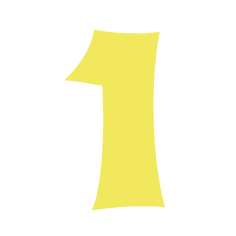
<style>
.page{position:relative;width:236px;height:236px;background:#ffffff}
.page>*{position:absolute;margin:0}
.t1{font:250px "SpicyRice-Regular";color:#f2e85e}
</style>
<div class="page">
<p class="t1" style="left:64px;top:29px;width:102px;height:182px">1</p>
</div>
